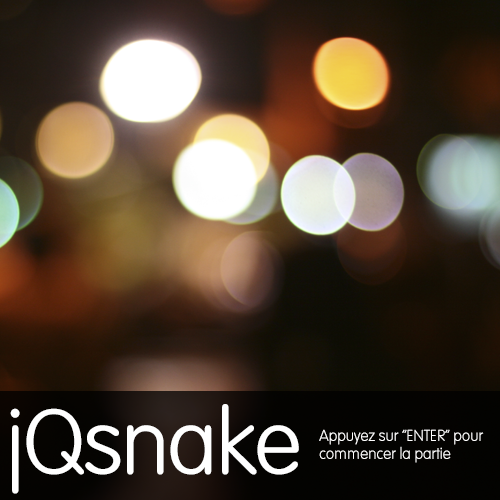
<style>
.page{position:relative;width:500px;height:500px}
.page>*{position:absolute;margin:0}
.t1{font:90.7px "VAGRoundedLT-Thin";letter-spacing:-0.02em;color:#ffffff}
.t2{font:15.8px "VAGRoundedLT-Thin";letter-spacing:-0.02em;color:#ffffff}
</style>
<div class="page">
<p class="t1" style="left:10px;top:404px;width:289px;height:90px">jQsnake</p>
<p class="t2" style="left:319px;top:429px;width:165px;height:34px">Appuyez sur “ENTER” pour<br>commencer la partie</p>
</div>
